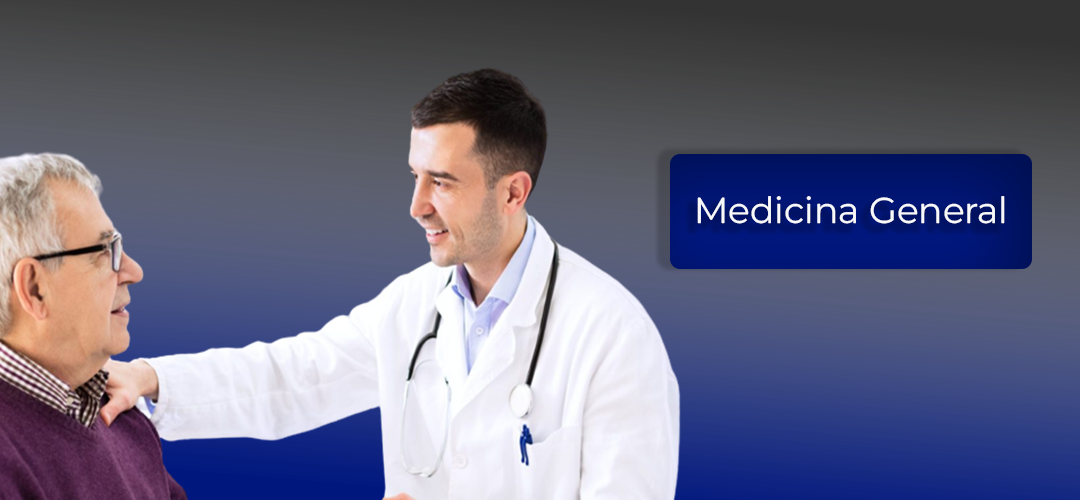
<style>
.page{position:relative;width:1080px;height:500px}
.page>*{position:absolute;margin:0}
.t1{font:36px "MontserratThin-Regular";color:#ffffff}
</style>
<div class="page">
<p class="t1" style="left:697px;top:196px;width:308px;height:28px;opacity:0.96">Medicina General</p>
</div>
